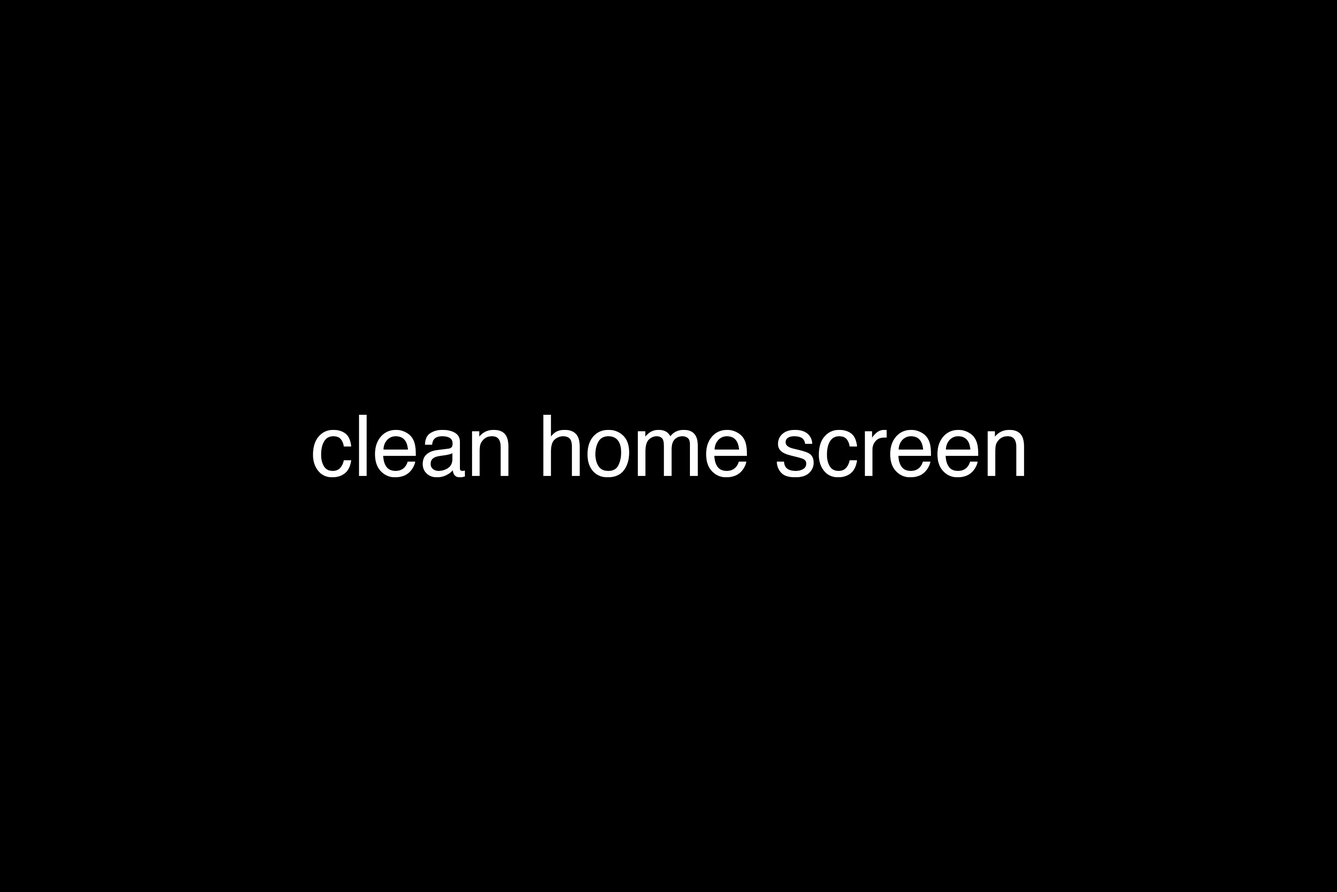
<style>
.page{position:relative;width:1337px;height:892px;background:#000000}
.page>*{position:absolute;margin:0}
.t1{font:85.1px "Helvetica";color:#ffffff}
</style>
<div class="page">
<p class="t1" style="left:313px;top:415px;width:711px;height:62px">clean home screen</p>
</div>
